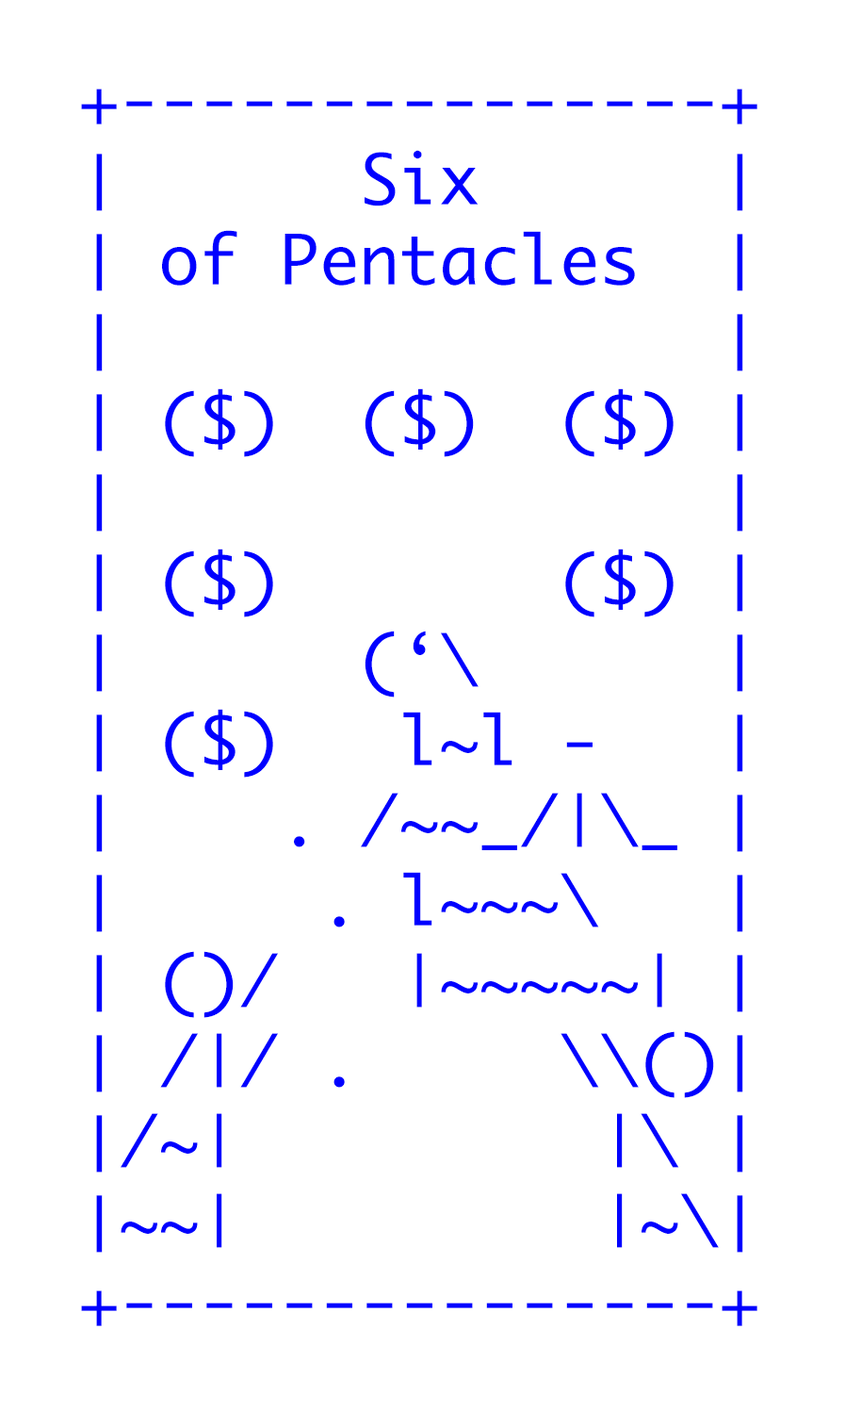
<style>
.page{position:relative;width:845px;height:1411px;background:#ffffff}
.page>*{position:absolute;margin:0}
.t1{font:66.7px "Monaco";color:#0000ff}
</style>
<div class="page">
<p class="t1" style="left:81px;top:89px;width:677px;height:1237px">+---------------+<br>│      Six      │<br>│ of Pentacles  │<br>│               │<br>│ ($)  ($)  ($) │<br>│               │ <br>│ ($)       ($) │<br>│      (‘\      │ <br>│ ($)   l~l -   │<br>│    . /~~_/|\_ │ <br>│     . l~~~\   │<br>│ ()/   |~~~~~| │ <br>│ /|/ .     \\()│ <br>│/~|         |\ │<br>│~~|         |~\│<br>+---------------+</p>
</div>
